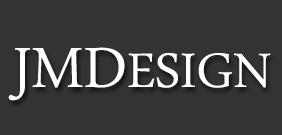
<style>
.page{position:relative;width:282px;height:135px;background:#333333}
.page>*{position:absolute;margin:0}
.t1{font:71px "DaunPenh";color:#ffffff}
.t2{font:83px "DaunPenh";color:#ffffff}
</style>
<div class="page">
<p class="t1" style="left:8px;top:47px;width:263px;height:54px"><span class="t2">JMD</span>ESIGN</p>
</div>
